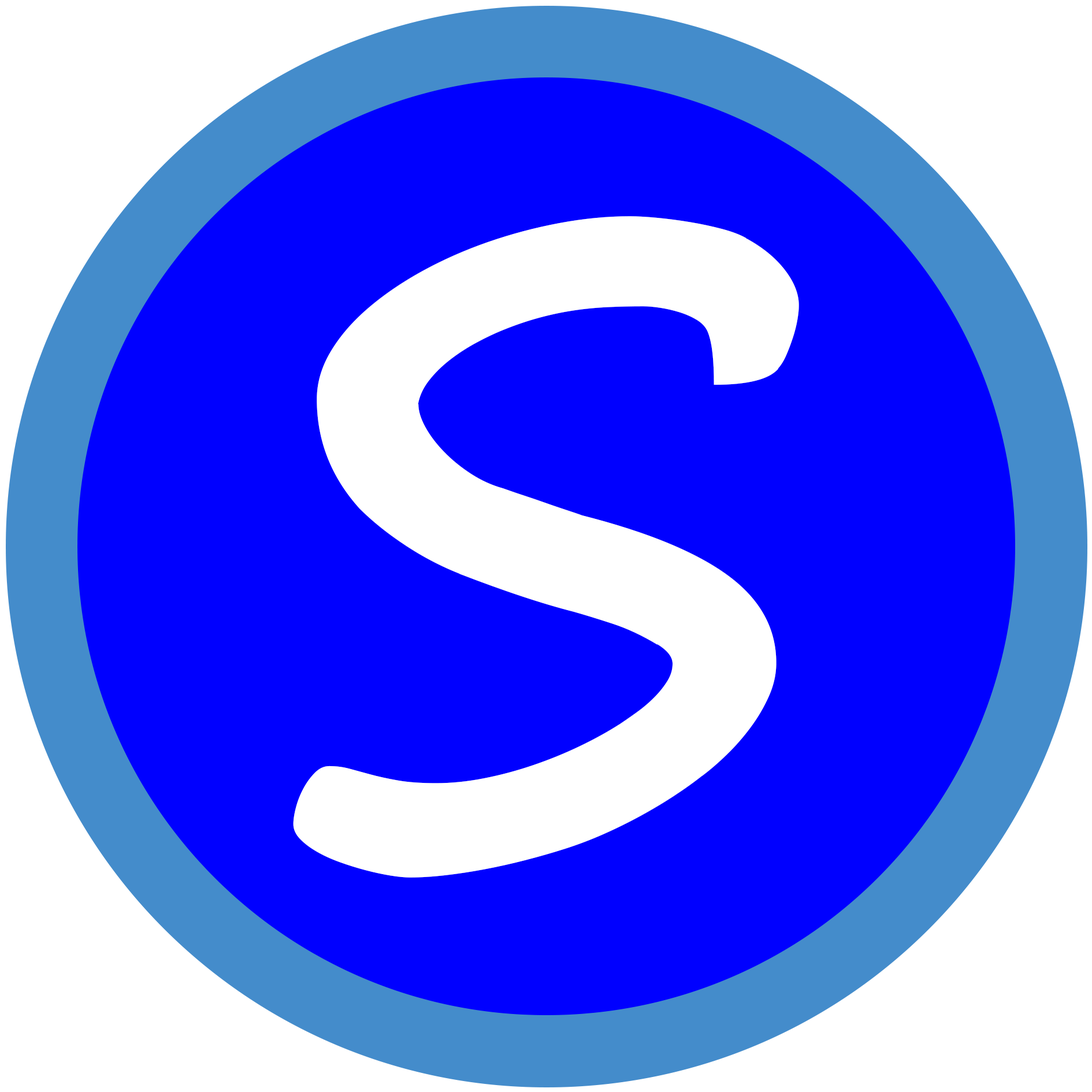
<style>
.page{position:relative;width:1092px;height:1092px;background:#0000ff}
.page>*{position:absolute;margin:0}
.t1{font:873.8px "SegoeScript-Bold";color:#ffffff}
</style>
<div class="page">
<p class="t1" style="left:293px;top:216px;width:506px;height:662px">S</p>
</div>
